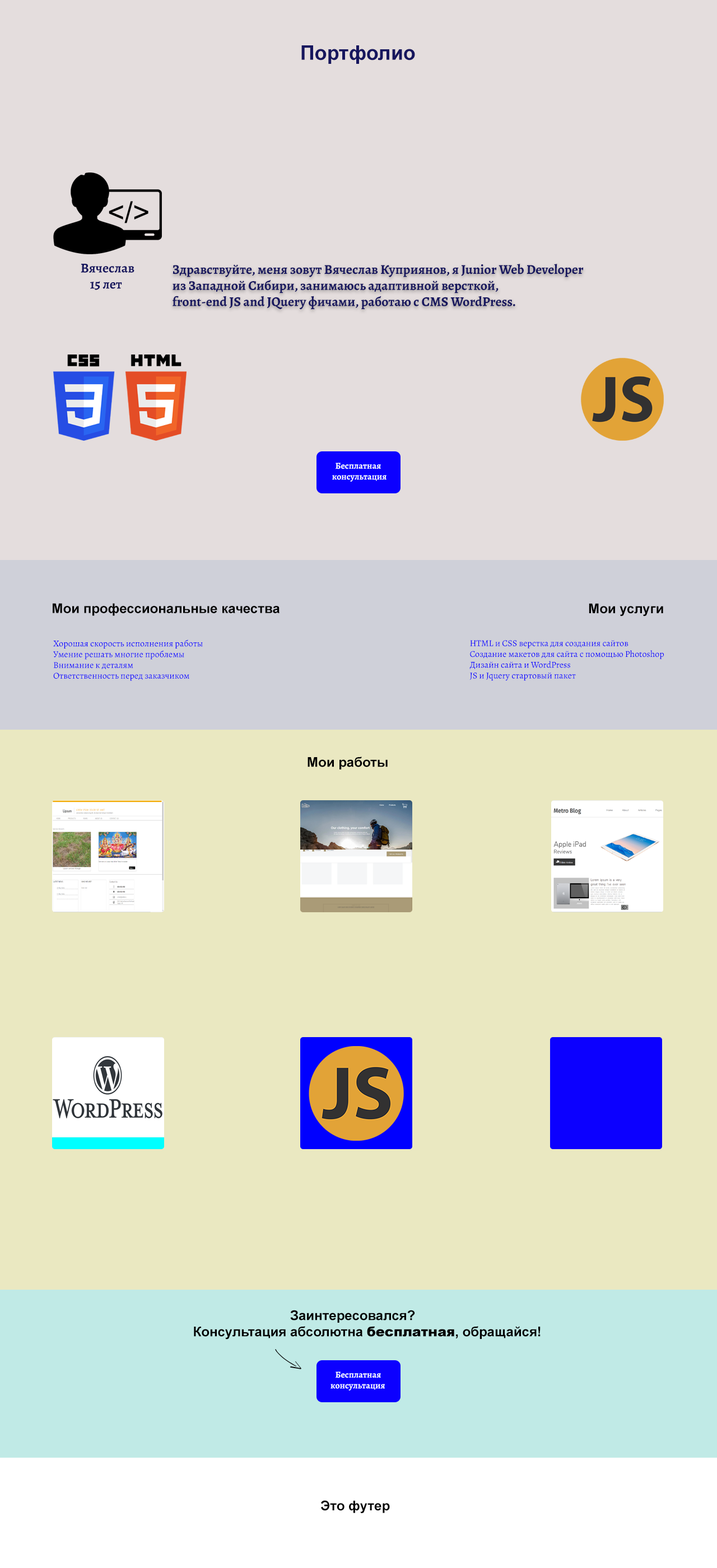
<style>
.page{position:relative;width:717px;height:1568px;background:#e4dddd}
.page>*{position:absolute;margin:0}
.t1{font:20.2px "Arial-BoldMT";color:#16165e}
.t2{font:13.4px "Alegreya-Bold";color:#16165e}
.t3{font:9px "Alegreya-Bold";color:#ffffff}
.t4{font:13.4px "Arial-BoldMT";color:#000000}
.t5{font:9px "Alegreya-Regular";color:#0c00ff}
.t6{font:13.4px "Arial-Black";color:#000000}
</style>
<div class="page">
<p class="t1" style="left:301px;top:45px;width:114px;height:19px">Портфолио</p>
<p class="t2" style="left:81px;top:264px;width:53px;height:26px">Вячеслав<br>    15 лет</p>
<p class="t2" style="left:172px;top:264px;width:412px;height:46px">Здравствуйте, меня зовут Вячеслав Куприянов, я Junior Web Developer <br>из Западной Сибири, занимаюсь адаптивной версткой, <br>front-end JS and JQuery фичами, работаю с CMS WordPress.</p>
<p class="t3" style="left:332px;top:463px;width:54px;height:19px">Бесплатная <br>          консультация</p>
<p class="t4" style="left:53px;top:603px;width:226px;height:13px">Мои профессиональные качества</p>
<p class="t4" style="left:589px;top:603px;width:74px;height:13px">Мои услуги</p>
<p class="t5" style="left:53px;top:640px;width:150px;height:41px">Хорошая скорость исполнения работы<br>Умение решать многие проблемы<br>Внимание к деталям<br>Ответственность перед заказчиком</p>
<p class="t5" style="left:469px;top:640px;width:195px;height:41px">HTML и CSS верстка для создания сайтов<br>Создание макетов для сайта с помощью Photoshop<br>Дизайн сайта и WordPress<br>JS и Jquery стартовый пакет</p>
<p class="t4" style="left:307px;top:757px;width:81px;height:12px">Мои работы</p>
<p class="t4" style="left:194px;top:1310px;width:346px;height:30px">Заинтересовался? <br>Консультация абсолютна <span class="t6">бесплатная</span>, обращайся!</p>
<p class="t3" style="left:330px;top:1371px;width:55px;height:19px">Бесплатная <br>         консультация</p>
<p class="t4" style="left:321px;top:1500px;width:69px;height:13px">Это футер</p>
</div>
